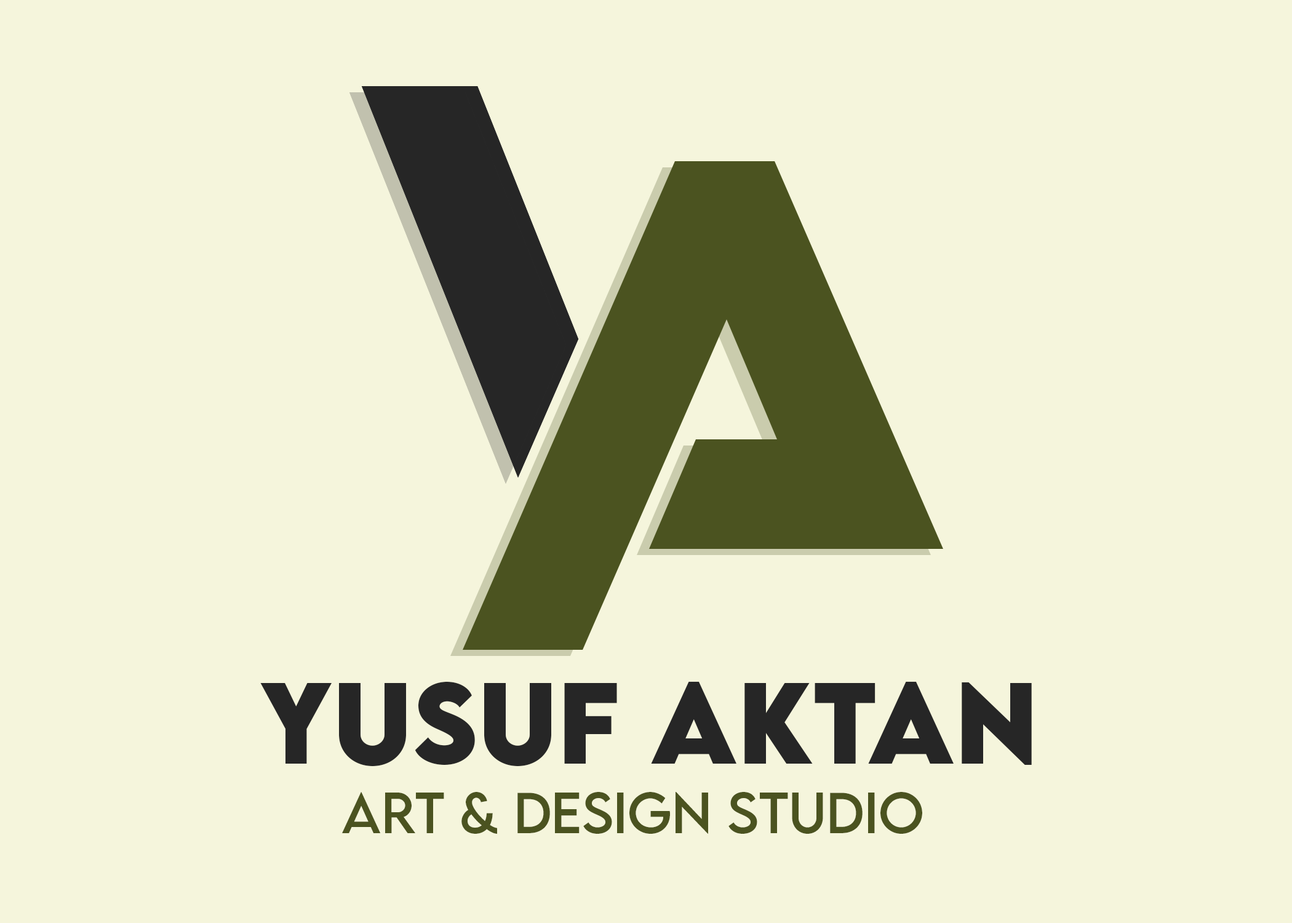
<style>
.page{position:relative;width:1292px;height:923px;background:#f5f5dc}
.page>*{position:absolute;margin:0}
.t1{font:102.5px "LEMONMILK-Bold";color:#262626}
.t2{font:51.3px "LEMONMILK-Regular";color:#4b5320}
</style>
<div class="page">
<p class="t1" style="left:260px;top:681px;width:772px;height:85px">yusuf aktan</p>
<p class="t2" style="left:342px;top:792px;width:580px;height:42px">ART &amp; DESIGN STUDIO</p>
</div>
